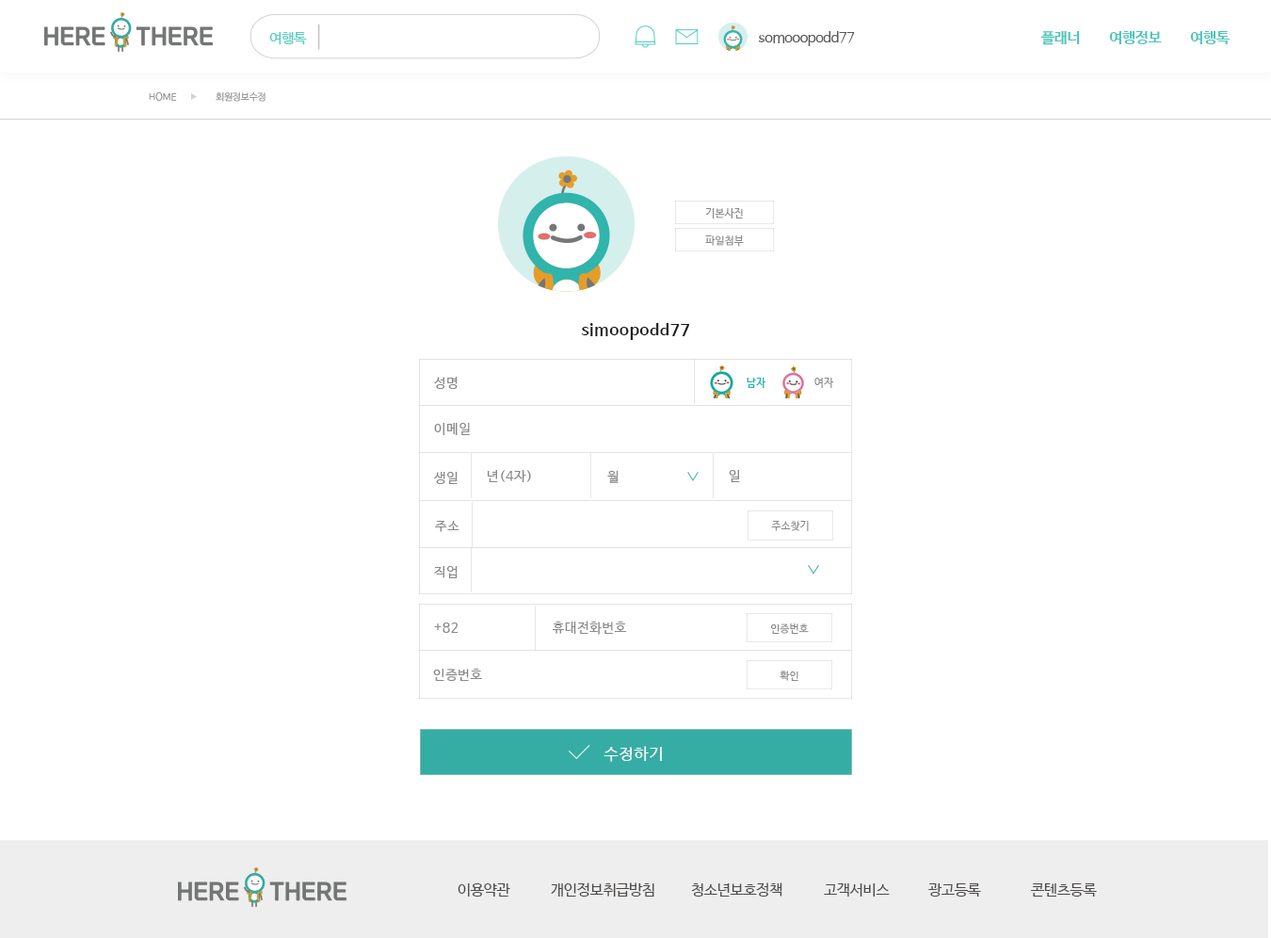
<style>
.page{position:relative;width:1271px;height:938px;background:#ffffff}
.page>*{position:absolute;margin:0}
.t1{font:14px "NanumBarunGothic";letter-spacing:-0.025em;color:#50cdc0}
.t2{font:14px "NanumBarunGothic";letter-spacing:-0.025em;color:#58595b}
.t3{font:14.9px "NanumBarunGothicBold";letter-spacing:-0.025em;color:#4bc5b9}
.t4{font:9.4px "NanumBarunGothic";color:#999a9a}
.t5{font:10.4px "NanumBarunGothic";letter-spacing:0.025em;color:#898989}
.t6{font:16px "NanumBarunGothicBold";letter-spacing:0.05em;color:#1b1b1b}
.t7{font:13.2px "NanumBarunGothic";letter-spacing:0.05em;color:#898989}
.t8{font:10.4px "NanumBarunGothicBold";letter-spacing:0.05em;color:#25b7aa}
.t9{font:10.4px "NanumBarunGothic";letter-spacing:0.05em;color:#898989}
.t10{font:16px "NanumBarunGothic";letter-spacing:0.05em;color:#ffffff}
.t11{font:15.1px "NanumBarunGothic";letter-spacing:-0.025em;color:#4c4948}
</style>
<div class="page">
<p class="t1" style="left:269px;top:32px;width:38px;height:12px">여행톡</p>
<p class="t2" style="left:759px;top:31px;width:96px;height:15px">somooopodd77</p>
<p class="t3" style="left:1041px;top:31px;width:39px;height:14px">플래너</p>
<p class="t3" style="left:1109px;top:31px;width:53px;height:13px">여행정보</p>
<p class="t3" style="left:1190px;top:31px;width:40px;height:13px">여행톡</p>
<p class="t4" style="left:149px;top:92px;width:28px;height:9px">HOME</p>
<p class="t4" style="left:216px;top:92px;width:50px;height:10px">회원정보수정</p>
<p class="t5" style="left:705px;top:208px;width:38px;height:10px">기본사진</p>
<p class="t5" style="left:705px;top:235px;width:39px;height:12px">파일첨부</p>
<p class="t6" style="left:582px;top:323px;width:107px;height:17px">simoopodd77</p>
<p class="t7" style="left:434px;top:377px;width:24px;height:12px">성명</p>
<p class="t8" style="left:747px;top:378px;width:20px;height:10px">남자</p>
<p class="t9" style="left:815px;top:378px;width:19px;height:10px">여자</p>
<p class="t7" style="left:434px;top:423px;width:36px;height:12px">이메일</p>
<p class="t7" style="left:434px;top:472px;width:24px;height:12px">생일</p>
<p class="t7" style="left:488px;top:470px;width:43px;height:12px">년(4자)</p>
<p class="t7" style="left:607px;top:470px;width:12px;height:13px">월</p>
<p class="t7" style="left:729px;top:470px;width:11px;height:12px">일</p>
<p class="t7" style="left:435px;top:521px;width:25px;height:11px">주소</p>
<p class="t5" style="left:771px;top:521px;width:38px;height:10px">주소찾기</p>
<p class="t7" style="left:434px;top:566px;width:24px;height:12px">직업</p>
<p class="t7" style="left:434px;top:622px;width:25px;height:11px">+82</p>
<p class="t7" style="left:552px;top:621px;width:75px;height:14px">휴대전화번호</p>
<p class="t5" style="left:771px;top:623px;width:38px;height:11px">인증번호</p>
<p class="t7" style="left:433px;top:669px;width:49px;height:13px">인증번호</p>
<p class="t5" style="left:780px;top:671px;width:19px;height:10px">확인</p>
<p class="t10" style="left:604px;top:746px;width:58px;height:16px">수정하기</p>
<p class="t11" style="left:458px;top:883px;width:52px;height:14px">이용약관</p>
<p class="t11" style="left:551px;top:882px;width:103px;height:15px">개인정보취급방침</p>
<p class="t11" style="left:691px;top:882px;width:92px;height:15px">청소년보호정책</p>
<p class="t11" style="left:824px;top:883px;width:66px;height:14px">고객서비스</p>
<p class="t11" style="left:929px;top:883px;width:52px;height:14px">광고등록</p>
<p class="t11" style="left:1031px;top:883px;width:66px;height:14px">콘텐츠등록</p>
</div>
